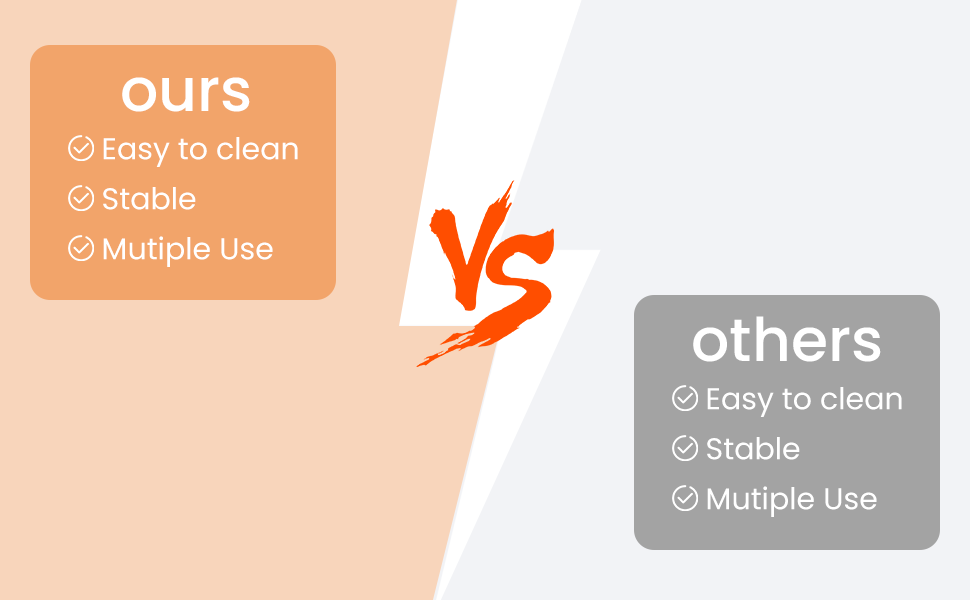
<style>
.page{position:relative;width:970px;height:600px;background:#f8d5bb}
.page>*{position:absolute;margin:0}
.t1{font:60px "Poppins-Medium";color:#ffffff}
.t2{font:30px "Poppins-Regular";color:#ffffff}
</style>
<div class="page">
<p class="t1" style="left:122px;top:77px;width:128px;height:35px">ours</p>
<p class="t2" style="left:103px;top:137px;width:195px;height:30px">Easy to clean</p>
<p class="t2" style="left:103px;top:187px;width:93px;height:23px">Stable</p>
<p class="t2" style="left:103px;top:236px;width:170px;height:31px">Mutiple Use</p>
<p class="t1" style="left:693px;top:316px;width:188px;height:46px">others</p>
<p class="t2" style="left:707px;top:387px;width:195px;height:30px">Easy to clean</p>
<p class="t2" style="left:707px;top:437px;width:93px;height:23px">Stable</p>
<p class="t2" style="left:707px;top:486px;width:170px;height:31px">Mutiple Use</p>
</div>
